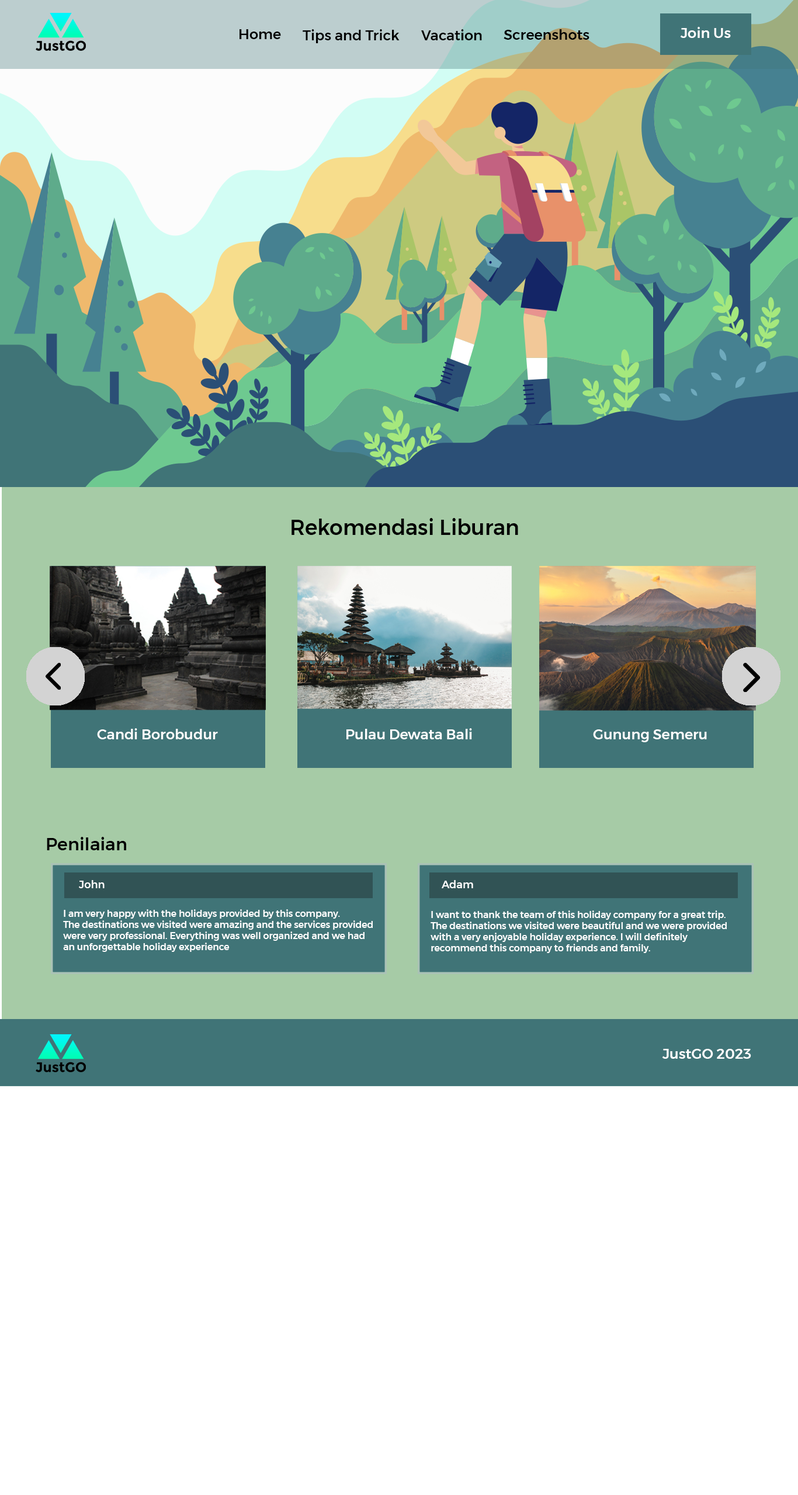
<style>
.page{position:relative;width:798px;height:1495px;background:#ffffff}
.page>*{position:absolute;margin:0}
.t1{font:14px "Montserrat-Medium";color:#000000}
.t2{font:14px "Montserrat-Medium";color:#ffffff}
.t3{font:21px "Montserrat-Medium";color:#000000}
.t4{font:17.5px "Montserrat-Medium";color:#000000}
.t5{font:10.5px "Montserrat-Medium";color:#ffffff}
.t6{font:9.2px "Montserrat-Medium";color:#ffffff}
</style>
<div class="page">
<p class="t1" style="left:239px;top:29px;width:42px;height:10px">Home</p>
<p class="t1" style="left:302px;top:29px;width:97px;height:14px">Tips and Trick</p>
<p class="t1" style="left:421px;top:29px;width:61px;height:11px">Vacation</p>
<p class="t1" style="left:503px;top:29px;width:86px;height:11px">Screenshots</p>
<p class="t2" style="left:680px;top:27px;width:51px;height:11px">Join Us</p>
<p class="t3" style="left:291px;top:518px;width:227px;height:17px">Rekomendasi Liburan</p>
<p class="t2" style="left:97px;top:728px;width:121px;height:11px">Candi Borobudur</p>
<p class="t2" style="left:346px;top:728px;width:126px;height:11px">Pulau Dewata Bali</p>
<p class="t2" style="left:593px;top:729px;width:114px;height:13px">Gunung Semeru</p>
<p class="t4" style="left:47px;top:837px;width:79px;height:13px">Penilaian</p>
<p class="t5" style="left:79px;top:880px;width:26px;height:8px">John</p>
<p class="t5" style="left:441px;top:880px;width:32px;height:8px">Adam</p>
<p class="t6" style="left:63px;top:909px;width:310px;height:43px">I am very happy with the holidays provided by this company. <br>The destinations we visited were amazing and the services provided<br>were very professional. Everything was well organized and we had<br>an unforgettable holiday experience</p>
<p class="t6" style="left:430px;top:910px;width:296px;height:43px">I want to thank the team of this holiday company for a great trip. <br>The destinations we visited were beautiful and we were provided<br>with a very enjoyable holiday experience. I will definitely <br>recommend this company to friends and family.</p>
<p class="t2" style="left:662px;top:1049px;width:89px;height:10px">JustGO 2023</p>
</div>
